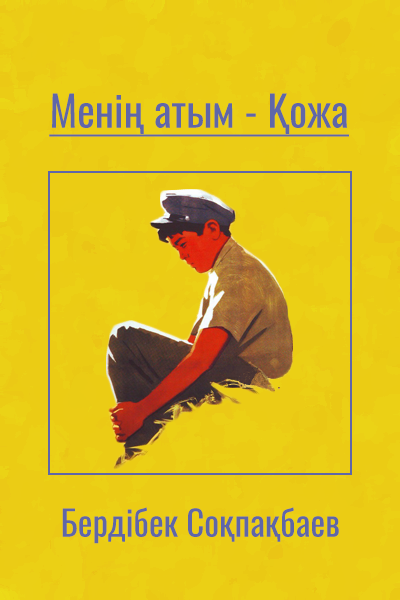
<style>
.page{position:relative;width:400px;height:600px;background:#ebcc14}
.page>*{position:absolute;margin:0}
.t1{font:42px "Oswald-Regular";color:#5f66a8;text-decoration:underline}
.t2{font:35px "Oswald-Regular";color:#5f66a8}
</style>
<div class="page">
<p class="t1" style="left:49px;top:93px;width:300px;height:44px">Менің атым - Қожа</p>
<p class="t2" style="left:62px;top:507px;width:277px;height:37px">Бердібек Соқпақбаев</p>
</div>
